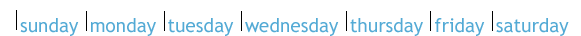
<style>
.page{position:relative;width:581px;height:36px;background:#ffffff}
.page>*{position:absolute;margin:0}
.t1{font:19px "TrebuchetMS";color:#53aad5}
</style>
<div class="page">
<p class="t1" style="left:20px;top:16px;width:549px;height:21px">sunday  monday  tuesday  wednesday  thursday  friday  saturday</p>
</div>
